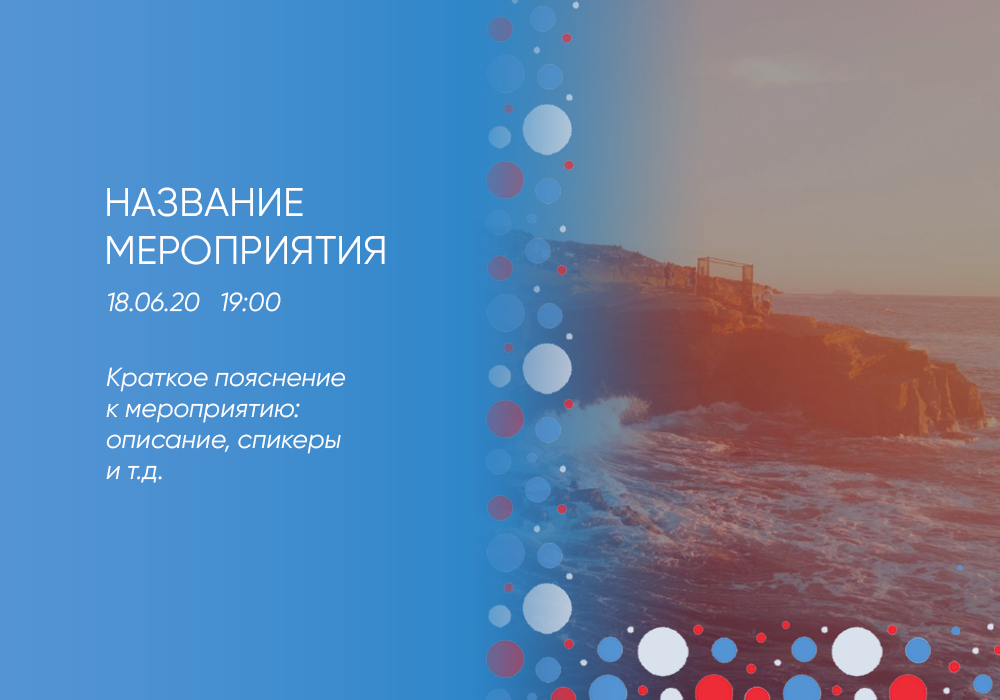
<style>
.page{position:relative;width:1000px;height:700px}
.page>*{position:absolute;margin:0}
.t1{font:40px "Gilroy-Regular";color:#ffffff}
.t2{font:26px "Gilroy-RegularItalic";color:#ffffff}
</style>
<div class="page">
<p class="t1" style="left:107px;top:187px;width:278px;height:78px">НАЗВАНИЕ<br>МЕРОПРИЯТИЯ</p>
<p class="t2" style="left:108px;top:292px;width:173px;height:20px">18.06.20   19:00</p>
<p class="t2" style="left:106px;top:367px;width:240px;height:116px">Краткое пояснение <br>к мероприятию:<br>описание, спикеры<br>и т.д.</p>
</div>
